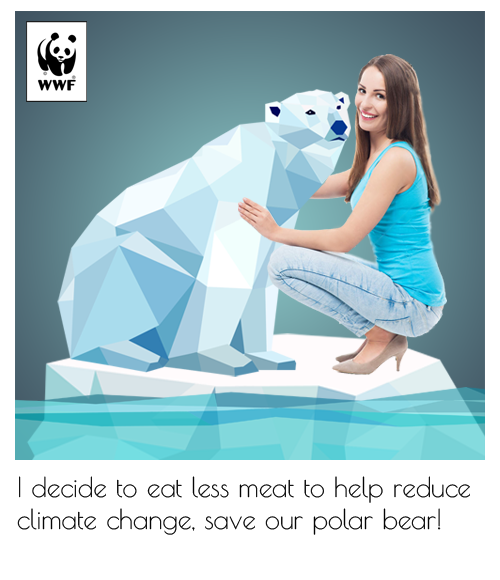
<style>
.page{position:relative;width:500px;height:580px;background:#ffffff}
.page>*{position:absolute;margin:0}
.t1{font:27px "PoiretOne-Regular";color:#040404}
</style>
<div class="page">
<p class="t1" style="left:17px;top:476px;width:453px;height:59px">I decide to eat less meat to help reduce climate change, save our polar bear!</p>
</div>
